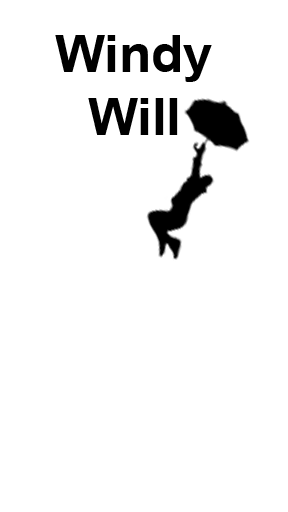
<style>
.page{position:relative;width:288px;height:512px;background:#ffffff}
.page>*{position:absolute;margin:0}
.t1{font:52.5px "Arial-BoldMT";color:#000000}
</style>
<div class="page">
<p class="t1" style="left:55px;top:35px;width:157px;height:100px;text-align:center">Windy <br>Will</p>
</div>
